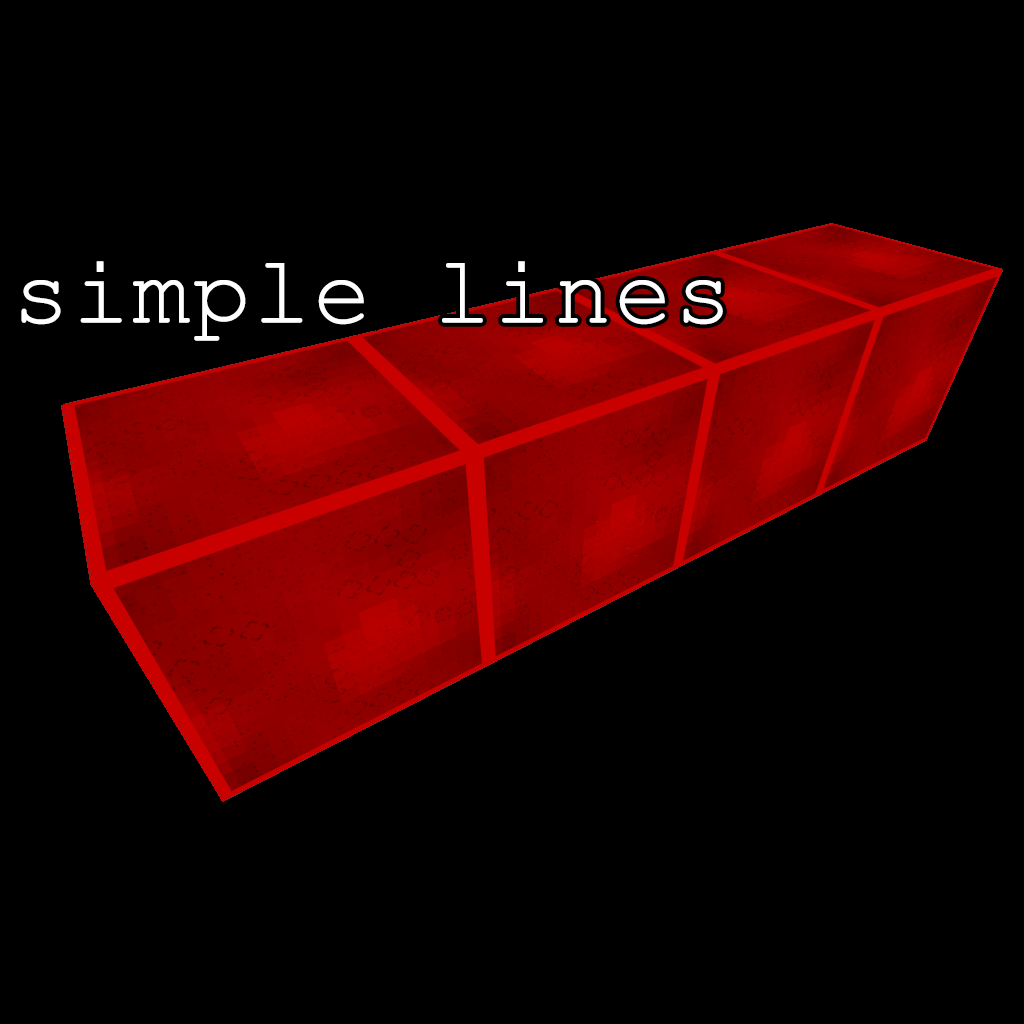
<style>
.page{position:relative;width:1024px;height:1024px;background:#000000}
.page>*{position:absolute;margin:0}
.t1{font:96px "CourierNewPSMT";color:#ffffff;font-weight:bold}
</style>
<div class="page">
<p class="t1" style="left:21px;top:261px;width:702px;height:80px">simple lines</p>
</div>
